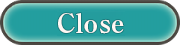
<style>
.page{position:relative;width:180px;height:45px}
.page>*{position:absolute;margin:0}
.t1{font:27px "RyuminPro-ExBold";color:#fff7f3}
</style>
<div class="page">
<p class="t1" style="left:58px;top:13px;width:66px;height:21px">Close</p>
</div>
